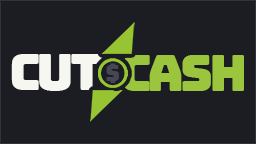
<style>
.page{position:relative;width:256px;height:144px;background:#1c1d23}
.page>*{position:absolute;margin:0}
.t1{font:50.7px "Bungee-Regular";letter-spacing:-0.08em;color:#f7f7f2}
.t2{font:22px "Bungee-Regular";letter-spacing:-0.08em;color:#464655}
.t3{font:50.7px "Bungee-Regular";letter-spacing:-0.08em;color:#9bc53d}
</style>
<div class="page">
<p class="t1" style="left:11px;top:54px;width:91px;height:37px">cut</p>
<p class="t2" style="left:106px;top:63px;width:13px;height:20px">$</p>
<p class="t3" style="left:122px;top:55px;width:122px;height:36px">cash</p>
</div>
